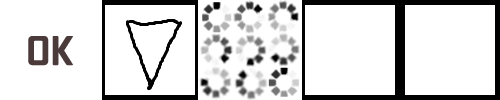
<style>
.page{position:relative;width:500px;height:100px;background:#ffffff}
.page>*{position:absolute;margin:0}
.t1{font:34.6px "CP_Revenge";color:#4b3a3a;scale:0.79 1}
</style>
<div class="page">
<p class="t1" style="left:28px;top:36px;width:45px;height:30px">OK</p>
</div>
